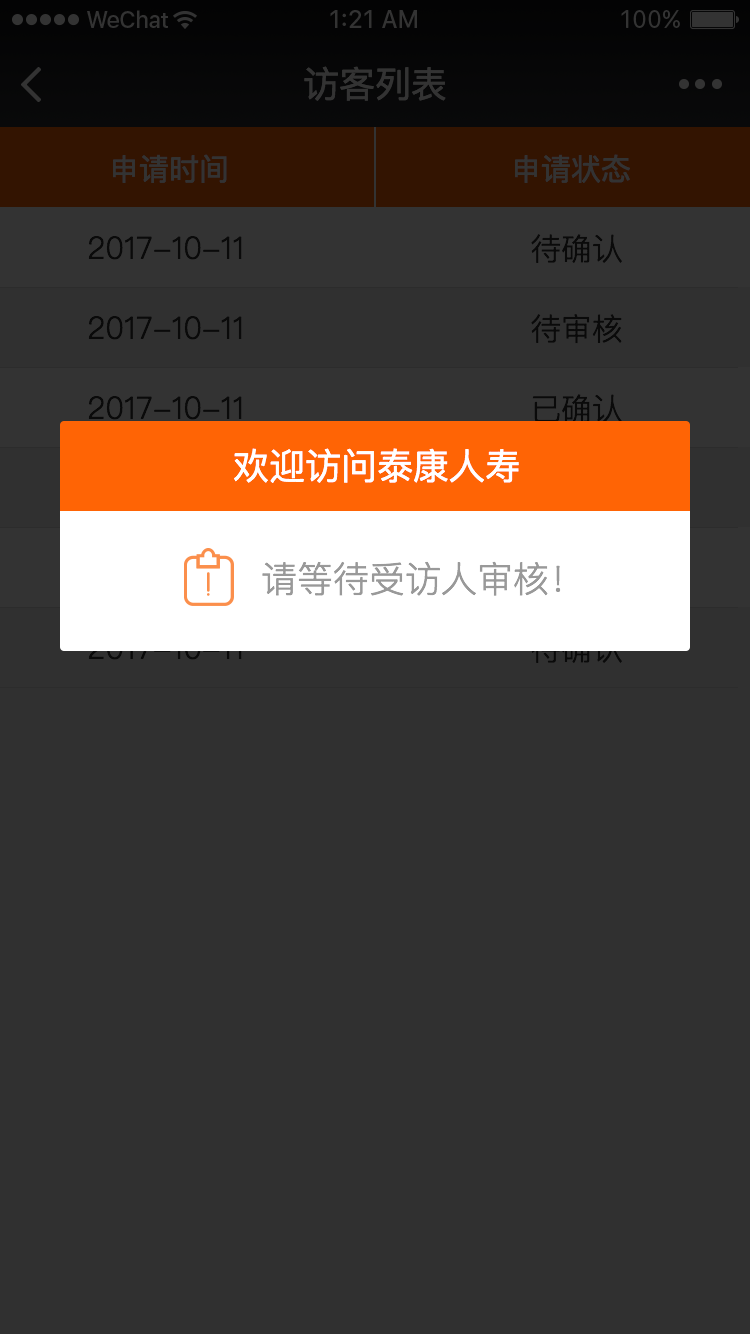
<style>
.page{position:relative;width:750px;height:1334px;background:#303030}
.page>*{position:absolute;margin:0}
.t1{font:36px "PingFangSC-Regular";color:#333333}
.t2{font:30px "PingFangSC-Regular";color:#333333}
.t3{font:30.7px "PingFangSC-Light";color:#0a0a0a}
.t4{font:36px "PingFangSC-Regular";color:#ffffff}
.t5{font:36px "PingFangSC-Light";color:#999999}
</style>
<div class="page">
<p class="t1" style="left:304px;top:66px;width:142px;height:35px">访客列表</p>
<p class="t2" style="left:113px;top:154px;width:114px;height:29px">申请时间</p>
<p class="t2" style="left:515px;top:154px;width:115px;height:29px">申请状态</p>
<p class="t3" style="left:88px;top:236px;width:154px;height:24px">2017-10-11</p>
<p class="t3" style="left:531px;top:234px;width:91px;height:29px">待确认</p>
<p class="t3" style="left:88px;top:316px;width:154px;height:24px">2017-10-11</p>
<p class="t3" style="left:531px;top:314px;width:91px;height:30px">待审核</p>
<p class="t3" style="left:88px;top:396px;width:154px;height:24px">2017-10-11</p>
<p class="t3" style="left:532px;top:394px;width:90px;height:29px">已确认</p>
<p class="t4" style="left:234px;top:448px;width:285px;height:35px">欢迎访问泰康人寿</p>
<p class="t5" style="left:262px;top:561px;width:299px;height:35px">请等待受访人审核！</p>
</div>
